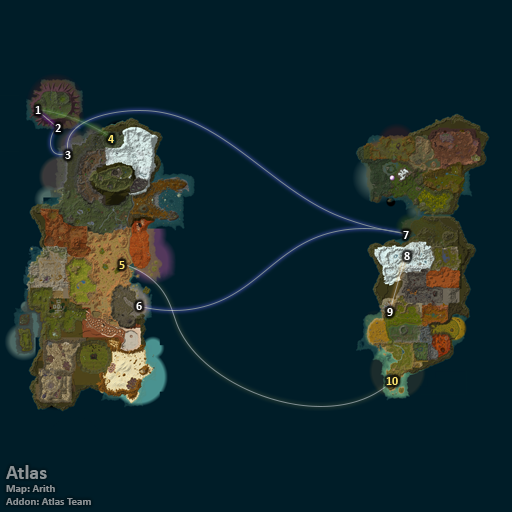
<style>
.page{position:relative;width:512px;height:512px;background:#001d28}
.page>*{position:absolute;margin:0}
.t1{font:12px "Calibri-Bold";color:#ffffff}
.t2{font:12px "Calibri-Bold";color:#fee570}
.t3{font:11px "Calibri-Bold";color:#8d9396}
.t4{font:20px "Calibri-Bold";color:#8d9396}
</style>
<div class="page">
<p class="t1" style="left:35px;top:106px;width:6px;height:8px">1</p>
<p class="t1" style="left:55px;top:124px;width:6px;height:8px">2</p>
<p class="t2" style="left:108px;top:135px;width:6px;height:8px">4</p>
<p class="t1" style="left:65px;top:151px;width:6px;height:8px">3</p>
<p class="t1" style="left:403px;top:231px;width:6px;height:8px">7</p>
<p class="t1" style="left:404px;top:252px;width:6px;height:8px">8</p>
<p class="t2" style="left:119px;top:261px;width:6px;height:8px">5</p>
<p class="t1" style="left:136px;top:302px;width:6px;height:8px">6</p>
<p class="t1" style="left:387px;top:308px;width:6px;height:8px">9</p>
<p class="t2" style="left:386px;top:377px;width:12px;height:8px">10</p>
<p class="t3" style="left:6px;top:465px;width:85px;height:40px"><span class="t4">Atlas<br></span>Map: Arith<br>Addon: Atlas Team</p>
</div>
